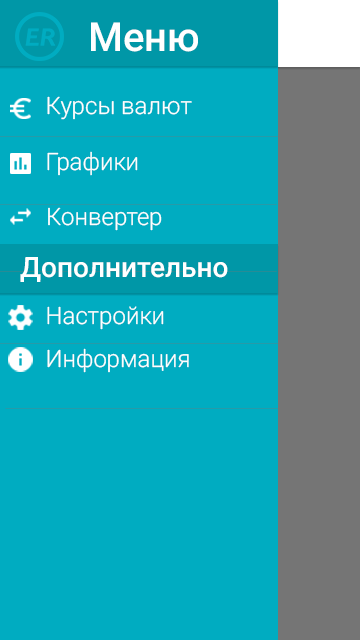
<style>
.page{position:relative;width:360px;height:640px;background:#00acc1}
.page>*{position:absolute;margin:0}
.t1{font:40px "Roboto-Medium";color:#ffffff}
.t2{font:24px "Roboto-Light";color:#ffffff}
.t3{font:28px "Roboto-Medium";color:#ffffff}
</style>
<div class="page">
<p class="t1" style="left:91px;top:22px;width:107px;height:30px">Меню</p>
<p class="t2" style="left:47px;top:96px;width:145px;height:24px">Курсы валют</p>
<p class="t2" style="left:47px;top:151px;width:91px;height:25px">Графики</p>
<p class="t2" style="left:48px;top:207px;width:114px;height:24px">Конвертер</p>
<p class="t3" style="left:20px;top:257px;width:208px;height:25px">Дополнительно</p>
<p class="t2" style="left:47px;top:306px;width:117px;height:24px">Настройки</p>
<p class="t2" style="left:47px;top:348px;width:142px;height:25px">Информация</p>
</div>
